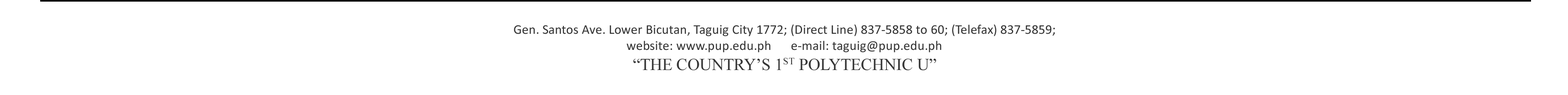
<style>
.page{position:relative;width:1568px;height:95px;background:#ffffff}
.page>*{position:absolute;margin:0}
.t1{font:13.4px "Calibri";color:#363636}
.t2{font:16.8px "TimesNewRomanPSMT";color:#363636}
</style>
<div class="page">
<p class="t1" style="left:514px;top:25px;width:541px;height:45px;text-align:center">Gen. Santos Ave. Lower Bicutan, Taguig City 1772; (Direct Line) 837-5858 to 60; (Telefax) 837-5859;<br>website: www.pup.edu.ph      e-mail: taguig@pup.edu.ph<br><span class="t2">“THE COUNTRY’S 1ST POLYTECHNIC U”</span></p>
</div>
